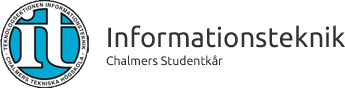
<style>
.page{position:relative;width:345px;height:88px;background:#ffffff}
.page>*{position:absolute;margin:0}
.t1{font:27.7px "Ubuntu";color:#323232}
.t2{font:12.3px "Ubuntu";color:#323232}
</style>
<div class="page">
<p class="t1" style="left:108px;top:25px;width:237px;height:23px">Informationsteknik</p>
<p class="t2" style="left:106px;top:55px;width:117px;height:11px">Chalmers Studentkår</p>
</div>
